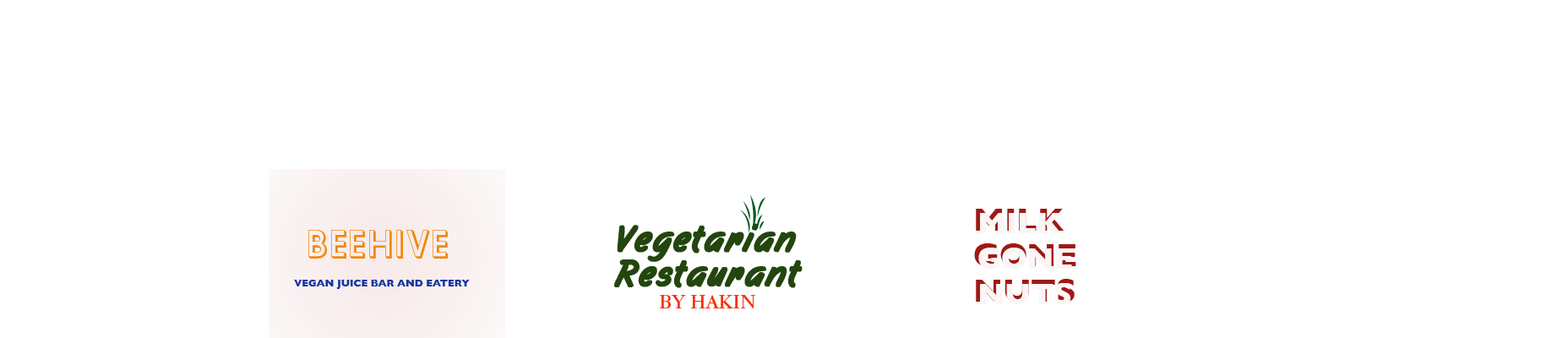
<style>
.page{position:relative;width:1568px;height:338px;background:#ffffff}
.page>*{position:absolute;margin:0}
.t1{font:32.6px/35.4px "GillSans-Bold";text-transform:uppercase}
.t2{font:37.2px "GillSans-Shadowed";color:#f1880c;text-transform:uppercase}
.t3{font:37.2px/34.6px "FilbertBrush-PERSONALUSEONLY";color:#22460e;font-weight:bold}
.t4{font:10.1px "GillSans-Bold";color:#1237a1;text-transform:uppercase}
.t5{font:21.1px "Garamond-Book";color:#f82f07;text-transform:uppercase}
</style>
<div class="page">
<p class="t1" style="left:974px;top:209px;width:102px;height:93px">milk<br>GONE<br>nuts</p>
<p class="t2" style="left:308px;top:230px;width:140px;height:29px">BEEHIVE</p>
<p class="t3" style="left:614px;top:223px;width:189px;height:65px">Vegetarian<br>Restaurant</p>
<p class="t4" style="left:294px;top:280px;width:176px;height:9px">vegan juice bar and eatery</p>
<p class="t5" style="left:660px;top:295px;width:96px;height:13px">BY HAKIN</p>
</div>
